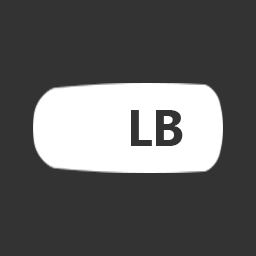
<style>
.page{position:relative;width:256px;height:256px;background:#333333}
.page>*{position:absolute;margin:0}
.t1{font:50px "MicrosoftNewTaiLue-Bold";color:#333333}
</style>
<div class="page">
<p class="t1" style="left:131px;top:110px;width:52px;height:36px">LB</p>
</div>
